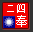
<style>
.page{position:relative;width:33px;height:32px;background:#f20000}
.page>*{position:absolute;margin:0}
.t1{font:10.4px "SimSun";color:#ffffff}
.t2{font:11.7px "SimSun";color:#ffffff}
</style>
<div class="page">
<p class="t1" style="left:7px;top:4px;width:18px;height:9px">二四</p>
<p class="t2" style="left:16px;top:15px;width:11px;height:12px">奉</p>
</div>
